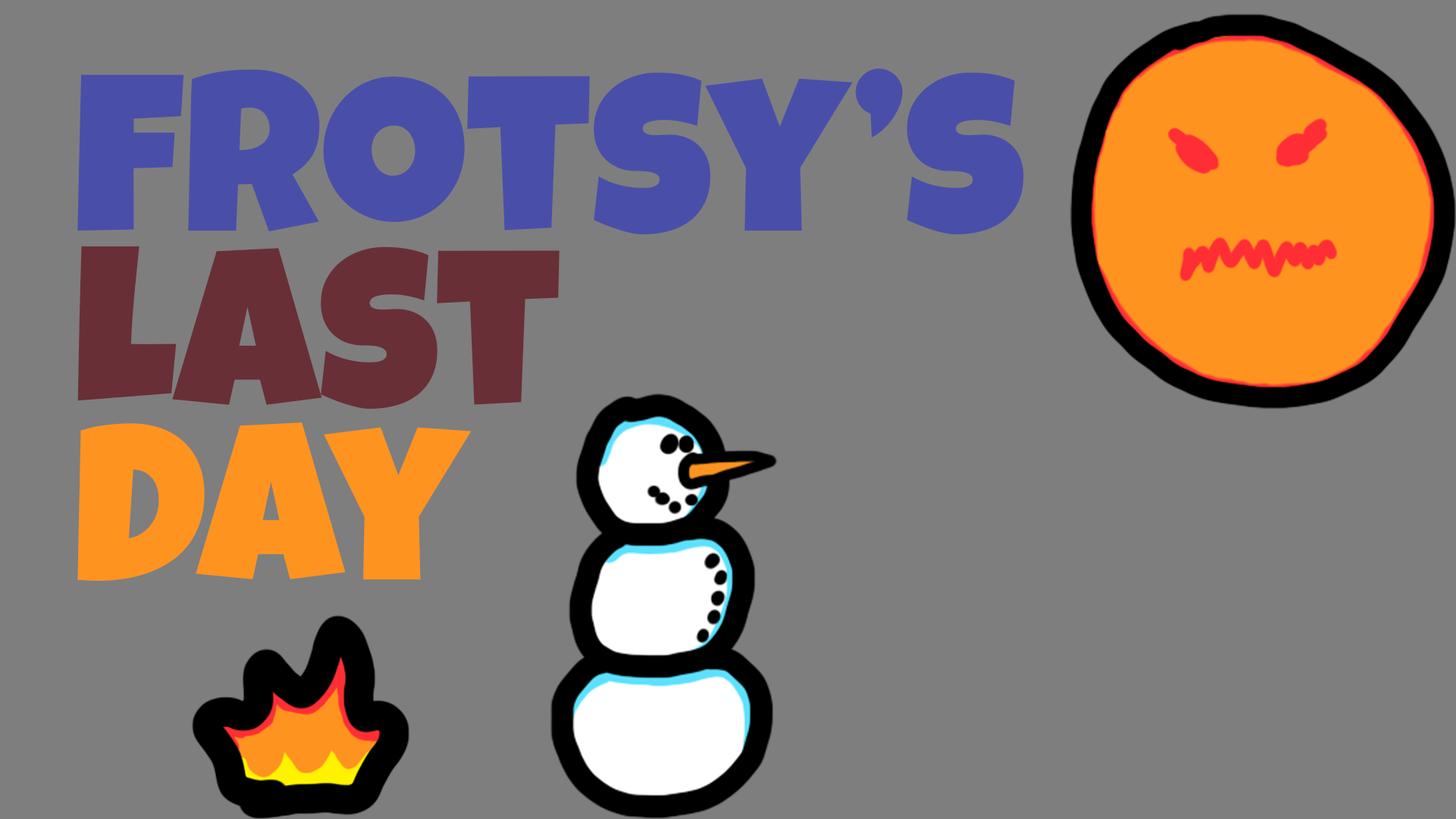
<style>
.page{position:relative;width:1456px;height:819px;background:#7e7e7e}
.page>*{position:absolute;margin:0}
.t1{font:227.5px/151.7px "LuckiestGuy-Regular";color:#494fa8}
.t2{font:227.5px/151.7px "LuckiestGuy-Regular";color:#692f36}
.t3{font:227.5px/151.7px "LuckiestGuy-Regular";color:#ff931f}
</style>
<div class="page">
<p class="t1" style="left:77px;top:68px;width:947px;height:513px">frotsy’s <br><span class="t2">Last<br></span><span class="t3">Day</span></p>
</div>
